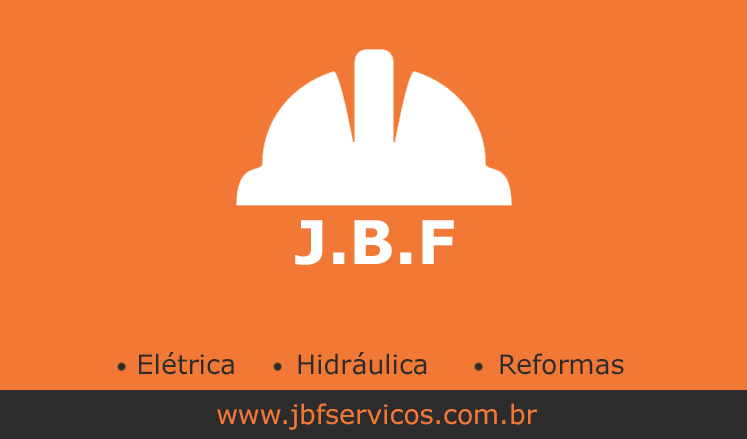
<style>
.page{position:relative;width:747px;height:439px;background:#f27935}
.page>*{position:absolute;margin:0}
.t1{font:60px "Verdana-Bold";color:#ffffff}
.t2{font:26.7px "Verdana";color:#2c2c2c}
.t3{font:26.7px "Verdana";color:#f27935}
</style>
<div class="page">
<p class="t1" style="left:295px;top:220px;width:159px;height:45px">J.B.F</p>
<p class="t2" style="left:139px;top:352px;width:95px;height:23px">Elétrica</p>
<p class="t2" style="left:298px;top:352px;width:129px;height:23px">Hidráulica</p>
<p class="t2" style="left:500px;top:353px;width:124px;height:22px">Reformas</p>
<p class="t3" style="left:217px;top:403px;width:320px;height:27px">www.jbfservicos.com.br</p>
</div>
